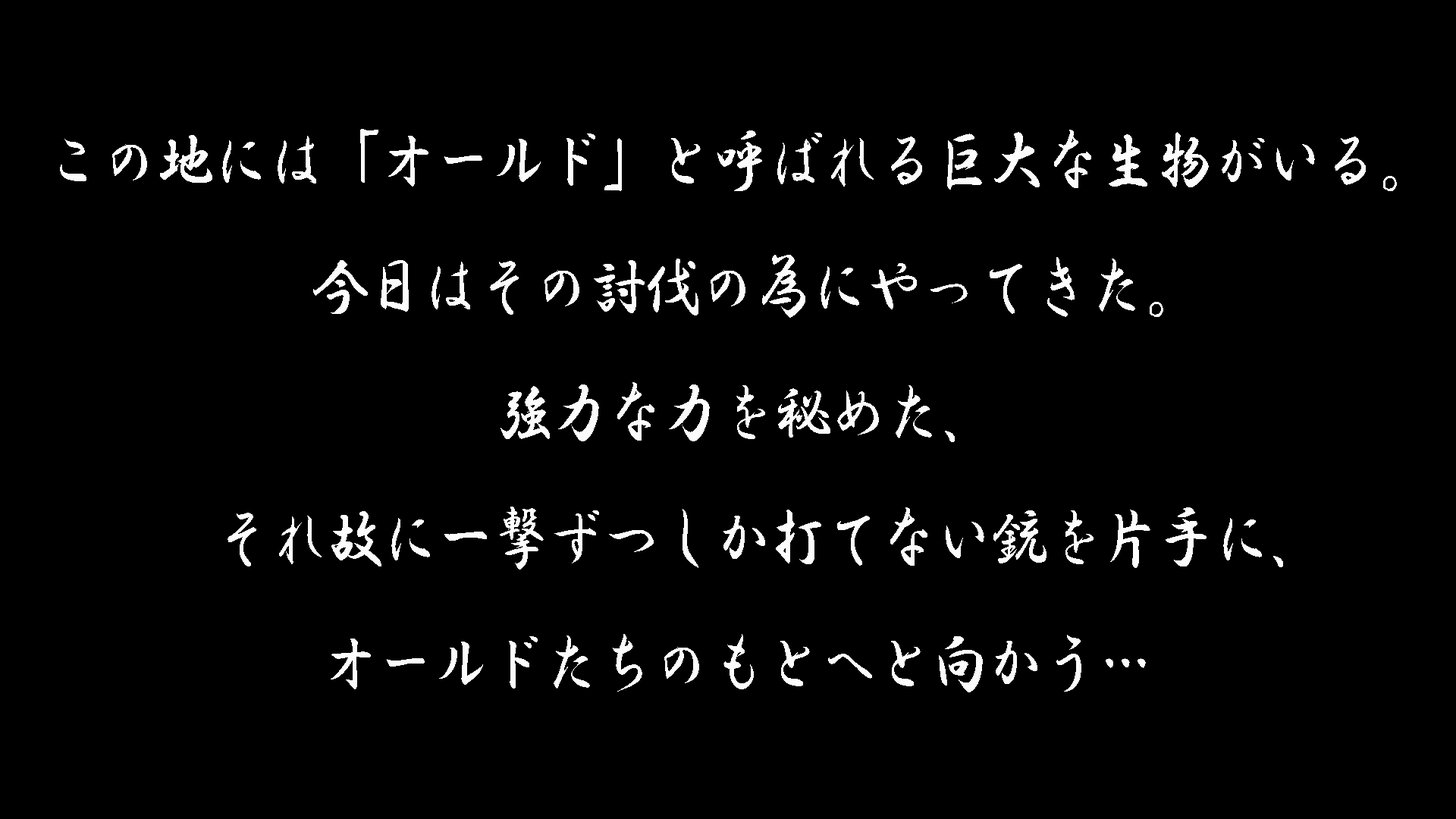
<style>
.page{position:relative;width:1456px;height:819px;background:#000000}
.page>*{position:absolute;margin:0}
.t1{font:71.1px "HGSGyoshotai";letter-spacing:-0.025em;color:#fcfcfc;scale:0.8 1}
</style>
<div class="page">
<p class="t1" style="left:60px;top:129px;width:1337px;height:62px">この地には「オールド」と呼ばれる巨大な生物がいる。</p>
<p class="t1" style="left:313px;top:255px;width:850px;height:63px">今日はその討伐の為にやってきた。</p>
<p class="t1" style="left:500px;top:382px;width:455px;height:60px">強力な力を秘めた、</p>
<p class="t1" style="left:227px;top:507px;width:1056px;height:63px">それ故に一撃ずつしか打てない銃を片手に、</p>
<p class="t1" style="left:331px;top:634px;width:815px;height:58px">オールドたちのもとへと向かう…</p>
</div>
